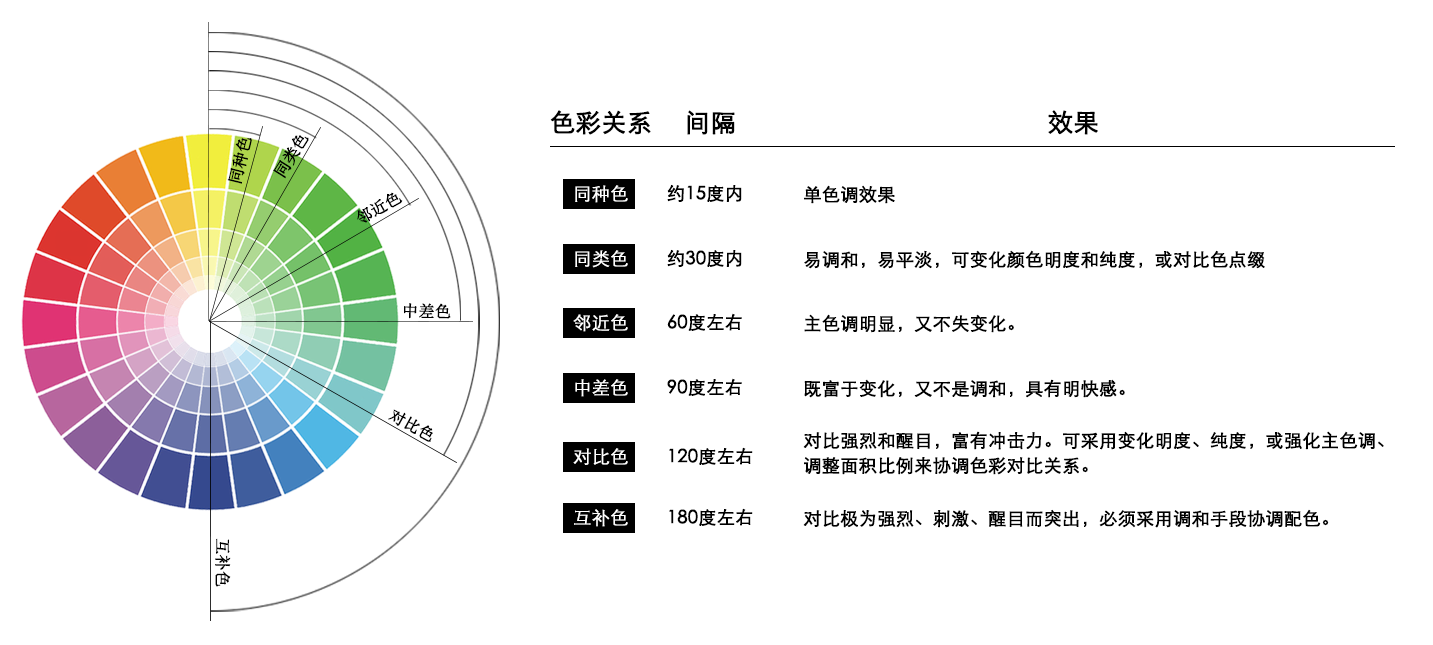
<style>
.page{position:relative;width:1433px;height:645px;background:#ffffff}
.page>*{position:absolute;margin:0}
.t1{font:25px "STXihei";color:#000000;font-weight:bold}
.t2{font:16px "SimSun";color:#000000;font-weight:bold}
.t3{font:18px "STXihei";color:#ffffff;font-weight:bold}
.t4{font:18px "STXihei";color:#000000;font-weight:bold}
.t5{font:18px/25px "STXihei";color:#000000;font-weight:bold}
</style>
<div class="page">
<p class="t1" style="left:550px;top:110px;width:101px;height:25px">色彩关系</p>
<p class="t1" style="left:687px;top:110px;width:48px;height:25px">间隔</p>
<p class="t1" style="left:1048px;top:110px;width:50px;height:25px">效果</p>
<p class="t2" style="left:273px;top:135px;width:36px;height:44px;rotate:-58deg">同类色</p>
<p class="t2" style="left:227px;top:138px;width:25px;height:46px;rotate:-76deg">同种色</p>
<p class="t3" style="left:575px;top:185px;width:53px;height:18px">同种色</p>
<p class="t4" style="left:667px;top:184px;width:75px;height:18px">约15度内</p>
<p class="t4" style="left:804px;top:185px;width:91px;height:19px">单色调效果</p>
<p class="t2" style="left:357px;top:192px;width:46px;height:31px;rotate:-29deg">邻近色</p>
<p class="t3" style="left:575px;top:250px;width:53px;height:18px">同类色</p>
<p class="t4" style="left:667px;top:249px;width:75px;height:18px">约30度内</p>
<p class="t4" style="left:804px;top:250px;width:461px;height:19px">易调和，易平淡，可变化颜色明度和纯度，或对比色点缀</p>
<p class="t2" style="left:404px;top:303px;width:47px;height:16px;rotate:1deg">中差色</p>
<p class="t3" style="left:573px;top:314px;width:55px;height:18px">邻近色</p>
<p class="t4" style="left:667px;top:313px;width:75px;height:18px">60度左右</p>
<p class="t4" style="left:804px;top:314px;width:210px;height:19px">主色调明显，又不失变化。</p>
<p class="t3" style="left:575px;top:379px;width:53px;height:18px">中差色</p>
<p class="t4" style="left:667px;top:378px;width:75px;height:18px">90度左右</p>
<p class="t4" style="left:804px;top:379px;width:321px;height:19px">既富于变化，又不是调和，具有明快感。</p>
<p class="t2" style="left:388px;top:409px;width:45px;height:33px;rotate:29deg">对比色</p>
<p class="t5" style="left:803px;top:431px;width:581px;height:44px">对比强烈和醒目，富有冲击力。可采用变化明度、纯度，或强化主色调、<br>调整面积比例来协调色彩对比关系。</p>
<p class="t3" style="left:573px;top:448px;width:55px;height:17px">对比色</p>
<p class="t4" style="left:669px;top:447px;width:84px;height:18px">120度左右</p>
<p class="t3" style="left:574px;top:509px;width:54px;height:18px">互补色</p>
<p class="t4" style="left:669px;top:508px;width:84px;height:18px">180度左右</p>
<p class="t4" style="left:803px;top:509px;width:526px;height:19px">对比极为强烈、刺激、醒目而突出，必须采用调和手段协调配色。</p>
<p class="t2" style="left:215px;top:538px;width:16px;height:49px;rotate:91deg">互补色</p>
</div>
